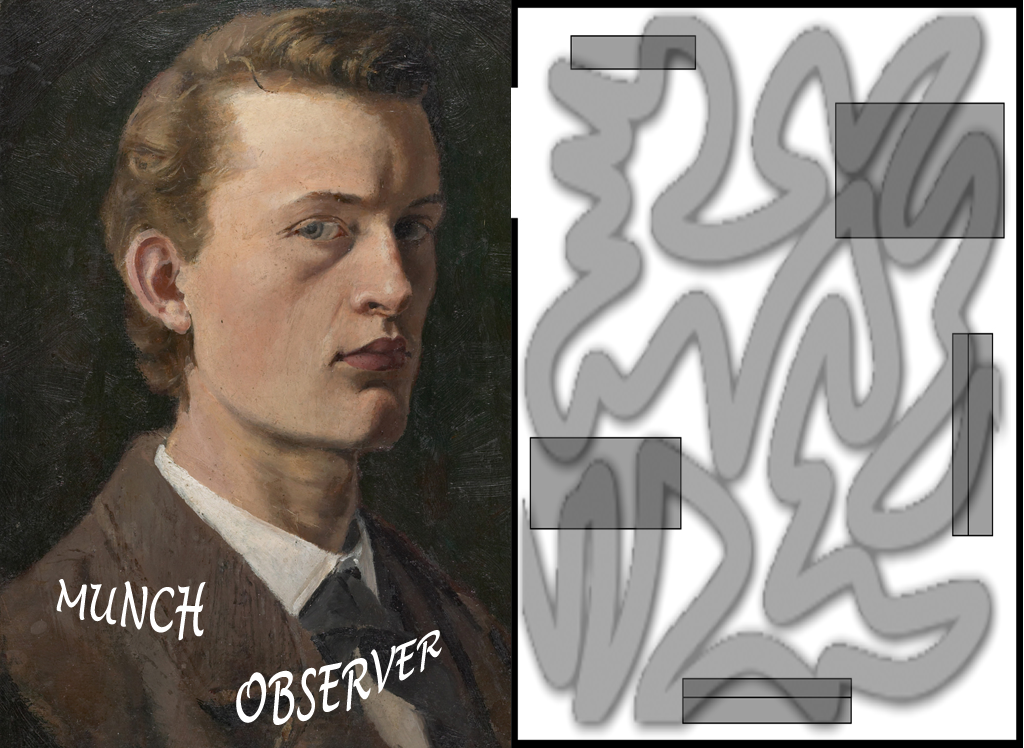
<style>
.page{position:relative;width:1024px;height:748px}
.page>*{position:absolute;margin:0}
.t1{font:36px/22px "LucidaHandwriting-Italic";letter-spacing:0.01em;color:#ffffff;text-transform:uppercase}
</style>
<div class="page">
<p class="t1" style="left:56px;top:579px;width:386px;height:146px">Munch<br><br>     Observer</p>
</div>
